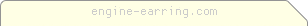
<style>
.page{position:relative;width:308px;height:26px;background:#ffffe5}
.page>*{position:absolute;margin:0}
.t1{font:16px "ProggyCleanTTSZ";color:#cccccc}
</style>
<div class="page">
<p class="t1" style="left:92px;top:6px;width:125px;height:12px">engine-earring.com</p>
</div>
